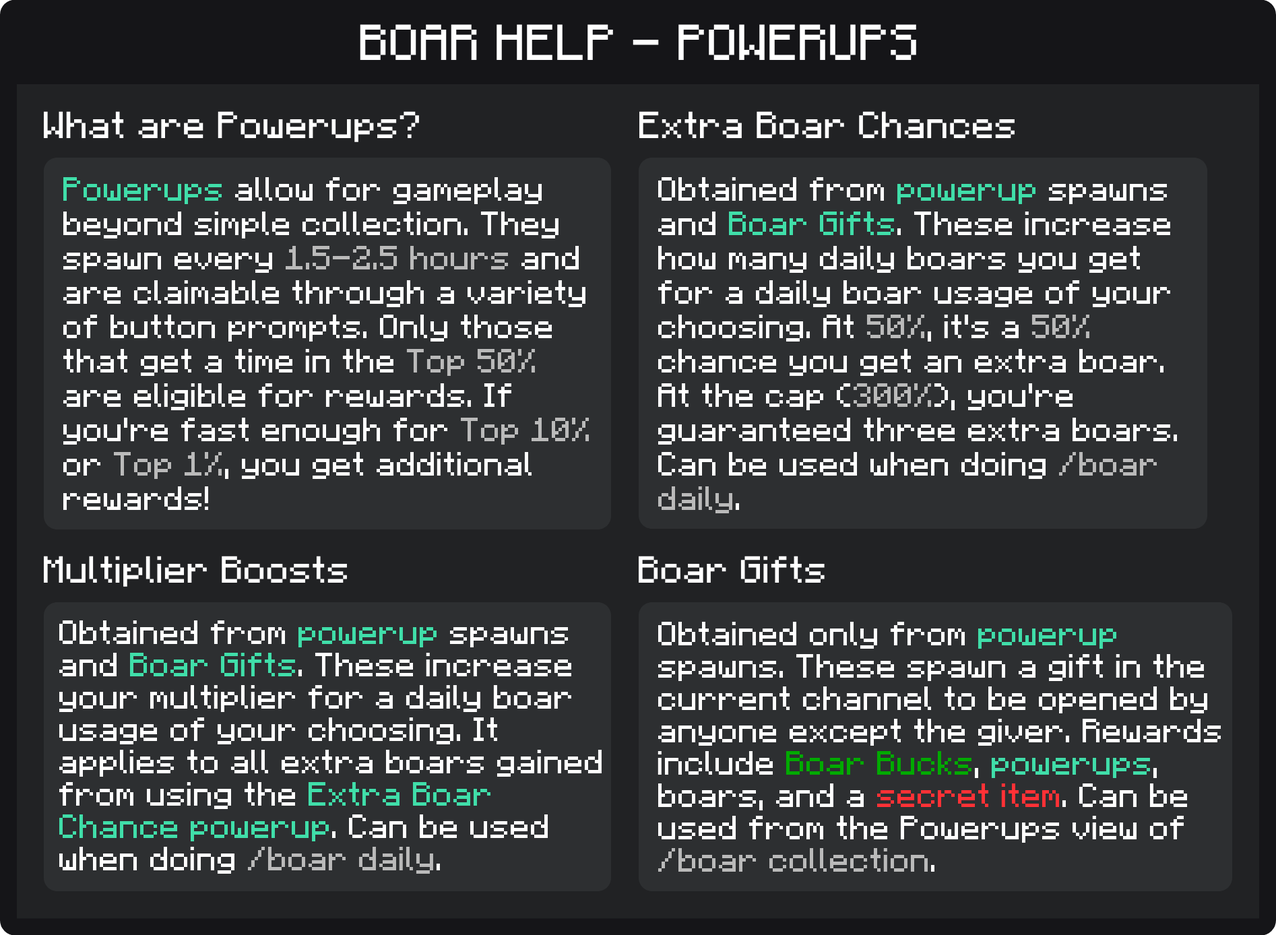
<style>
.page{position:relative;width:1276px;height:935px;background:#2d2f31}
.page>*{position:absolute;margin:0}
.t1{font:40.4px "F77-Minecraft";color:#ffffff}
.t2{font:30.3px "F77-Minecraft";color:#ffffff}
.t3{font:26.9px/34.3px "F77-Minecraft";color:#ffffff}
.t4{font:26.9px/34.3px "F77-Minecraft";color:#40dea9}
.t5{font:26.9px/34.3px "F77-Minecraft";color:#bababa}
.t6{font:26.9px "F77-Minecraft";color:#ffffff}
.t7{font:26.9px "F77-Minecraft";color:#40dea9}
.t8{font:26.9px "F77-Minecraft";color:#bababa}
.t9{font:26.9px "F77-Minecraft";color:#00aa00}
.t10{font:26.9px "F77-Minecraft";color:#ff3136}
</style>
<div class="page">
<p class="t1" style="left:360px;top:24px;width:556px;height:36px">BOAR HELP - POWERUPS</p>
<p class="t2" style="left:44px;top:111px;width:375px;height:31px">What are Powerups?</p>
<p class="t2" style="left:639px;top:111px;width:375px;height:27px">Extra Boar Chances</p>
<p class="t3" style="left:63px;top:177px;width:526px;height:333px"><span class="t4">Powerups </span>allow for gameplay<br>beyond simple collection. They<br>spawn every <span class="t5">1.5-2.5 hours </span>and<br>are claimable through a variety<br>of button prompts. Only those <br>that get a time in the <span class="t5">Top 50% <br></span>are eligible for rewards. If<br>you're fast enough for <span class="t5">Top 10%<br></span>or <span class="t5">Top 1%</span>, you get additional<br>rewards!</p>
<p class="t3" style="left:658px;top:177px;width:519px;height:336px">Obtained from <span class="t4">powerup</span> spawns<br>and <span class="t4">Boar Gifts</span>. These increase<br>how many daily boars you get<br>for a daily boar usage of your<br>choosing. At <span class="t5">50%</span>, it's a <span class="t5">50%<br></span>chance you get an extra boar.<br>At the cap (<span class="t5">300%</span>), you're<br>guaranteed three extra boars. <br>Can be used when doing <span class="t5">/boar <br>daily</span>.</p>
<p class="t2" style="left:44px;top:556px;width:303px;height:31px">Multiplier Boosts</p>
<p class="t2" style="left:638px;top:556px;width:186px;height:27px">Boar Gifts</p>
<p class="t6" style="left:59px;top:620px;width:542px;height:254px">Obtained from <span class="t7">powerup </span>spawns<br>and <span class="t7">Boar Gifts</span>. These increase<br>your multiplier for a daily boar<br>usage of your choosing. It <br>applies to all extra boars gained <br>from using the <span class="t7">Extra Boar <br>Chance powerup</span>. Can be used <br>when doing <span class="t8">/boar daily</span>.</p>
<p class="t6" style="left:657px;top:622px;width:563px;height:249px">Obtained only from <span class="t7">powerup<br></span>spawns. These spawn a gift in the<br>current channel to be opened by <br>anyone except the giver. Rewards <br>include <span class="t9">Boar Bucks</span>, <span class="t7">powerups</span>, <br>boars, and a <span class="t10">secret item</span>. Can be <br>used from the Powerups view of <br><span class="t8">/boar collection</span>.</p>
</div>
